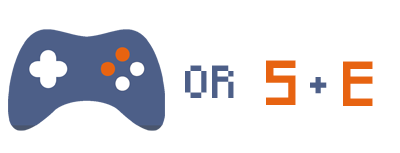
<style>
.page{position:relative;width:400px;height:153px;background:#ffffff}
.page>*{position:absolute;margin:0}
.t1{font:27px "Pixeled";color:#4d5f88}
.t2{font:37px "Pixeled";color:#e76311}
</style>
<div class="page">
<p class="t1" style="left:185px;top:65px;width:49px;height:33px">OR</p>
<p class="t2" style="left:266px;top:60px;width:30px;height:45px">S</p>
<p class="t2" style="left:343px;top:61px;width:30px;height:45px">E</p>
<p class="t1" style="left:310px;top:77px;width:17px;height:17px">+</p>
</div>
